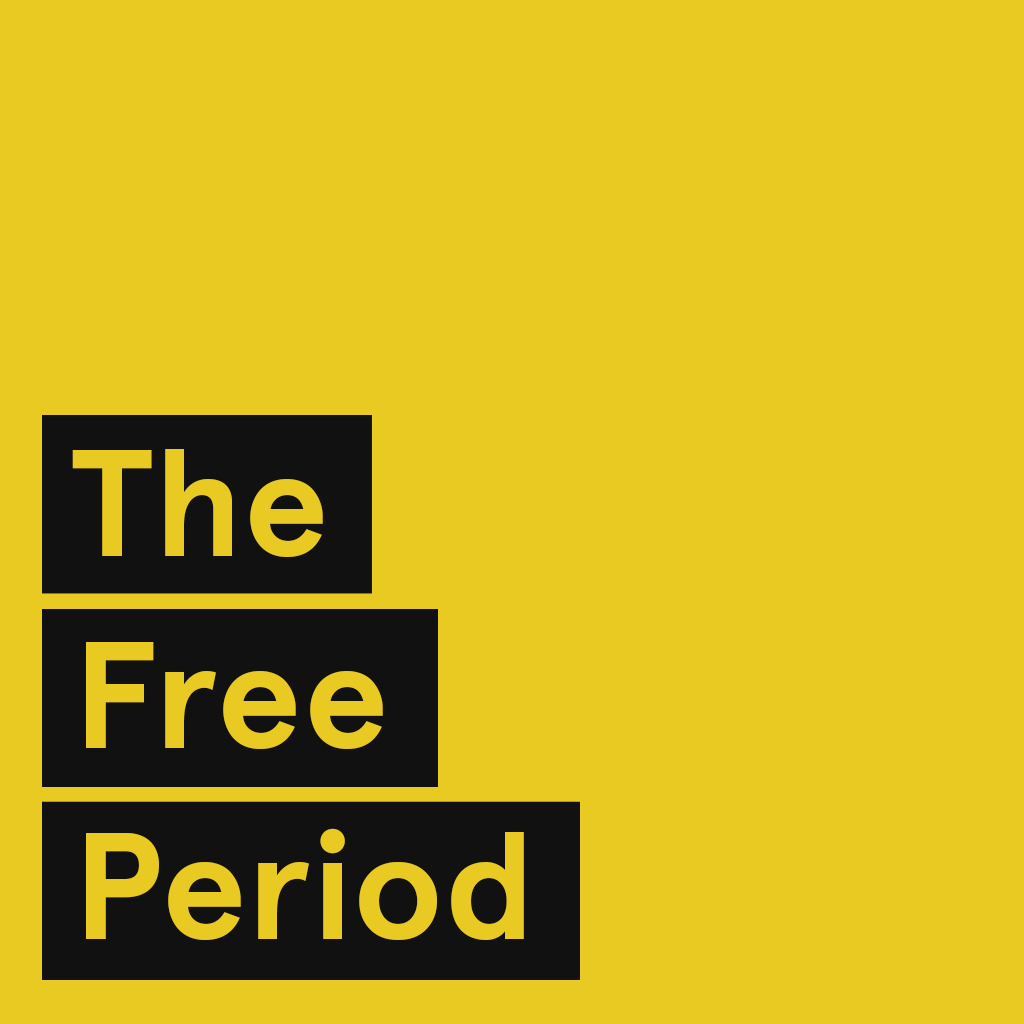
<style>
.page{position:relative;width:1024px;height:1024px;background:#e9ca23}
.page>*{position:absolute;margin:0}
.t1{font:151.6px/191.8px "Apercu-Bold";color:#e9ca23}
</style>
<div class="page">
<p class="t1" style="left:72px;top:449px;width:452px;height:491px">The<br>Free<br>Period</p>
</div>
